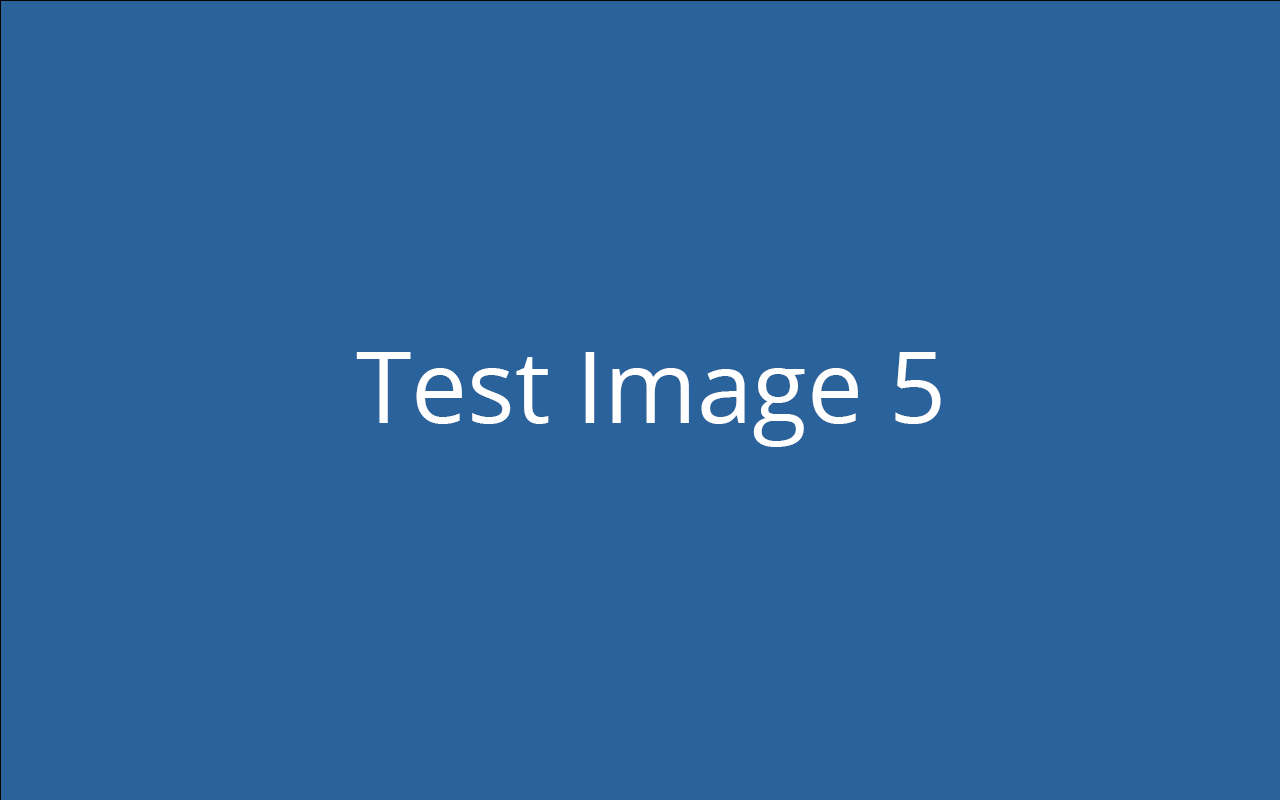
<style>
.page{position:relative;width:1280px;height:800px;background:#2a629b}
.page>*{position:absolute;margin:0}
.t1{font:100px "OpenSans-Regular";color:#ffffff}
</style>
<div class="page">
<p class="t1" style="left:356px;top:352px;width:585px;height:95px">Test Image 5</p>
</div>
